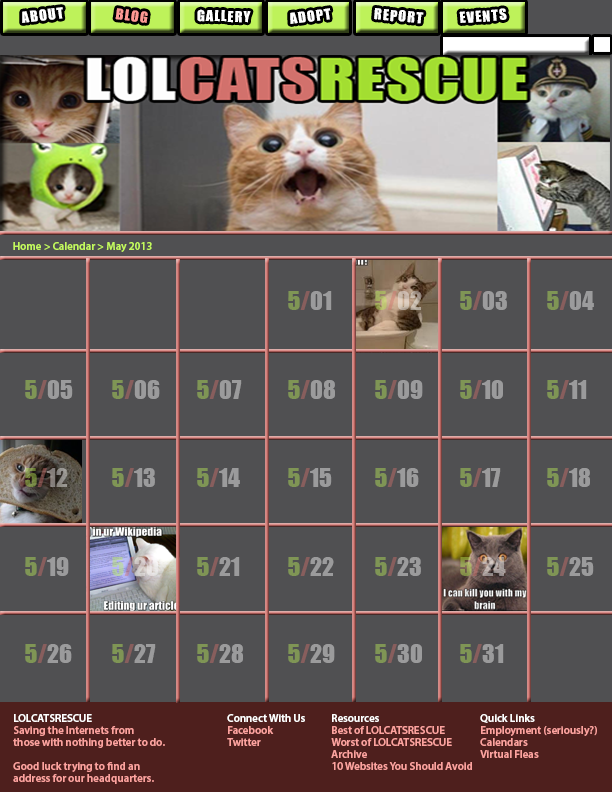
<style>
.page{position:relative;width:612px;height:792px;background:#505052}
.page>*{position:absolute;margin:0}
.t1{font:14px "Impact";letter-spacing:0.075em;color:#ffffff;scale:1.03 1}
.t2{font:14px "Impact";letter-spacing:0.075em;color:#fd9994;scale:1.03 1}
.t3{font:14px "Impact";letter-spacing:0.075em;color:#fdfdfd;scale:1.03 1}
.t4{font:11px "MyriadPro-Semibold";color:#c3f95d}
.t5{font:24px "Impact"}
.t6{font:11px/12px "MyriadPro-Semibold";color:#fda29e}
.t7{font:11px/12px "MyriadPro-Semibold";color:#ffffff}
</style>
<div class="page">
<p class="t1" style="left:22px;top:7px;width:41px;height:16px;rotate:-7deg">ABOUT</p>
<p class="t2" style="left:115px;top:8px;width:33px;height:15px;rotate:7deg">BLOG</p>
<p class="t1" style="left:197px;top:9px;width:54px;height:14px;rotate:2deg">GALLERY</p>
<p class="t1" style="left:290px;top:8px;width:41px;height:16px;rotate:-8deg">ADOPT</p>
<p class="t3" style="left:374px;top:8px;width:50px;height:16px;rotate:5deg">REPORT</p>
<p class="t1" style="left:459px;top:8px;width:48px;height:15px;rotate:-4deg">EVENTS</p>
<p class="t4" style="left:13px;top:242px;width:139px;height:10px">Home &gt; Calendar &gt; May 2013</p>
<p class="t5" style="left:288px;top:291px;width:44px;height:19px">5/01</p>
<p class="t5" style="left:375px;top:291px;width:47px;height:19px">5/02</p>
<p class="t5" style="left:460px;top:291px;width:47px;height:19px">5/03</p>
<p class="t5" style="left:547px;top:291px;width:47px;height:19px">5/04</p>
<p class="t5" style="left:25px;top:380px;width:48px;height:19px">5/05</p>
<p class="t5" style="left:112px;top:380px;width:48px;height:19px">5/06</p>
<p class="t5" style="left:197px;top:380px;width:45px;height:19px">5/07</p>
<p class="t5" style="left:288px;top:380px;width:47px;height:19px">5/08</p>
<p class="t5" style="left:375px;top:380px;width:48px;height:19px">5/09</p>
<p class="t5" style="left:460px;top:380px;width:43px;height:19px">5/10</p>
<p class="t5" style="left:547px;top:380px;width:40px;height:19px">5/11</p>
<p class="t5" style="left:25px;top:468px;width:43px;height:19px">5/12</p>
<p class="t5" style="left:112px;top:468px;width:43px;height:19px">5/13</p>
<p class="t5" style="left:197px;top:468px;width:43px;height:19px">5/14</p>
<p class="t5" style="left:288px;top:468px;width:44px;height:19px">5/15</p>
<p class="t5" style="left:375px;top:468px;width:44px;height:19px">5/16</p>
<p class="t5" style="left:460px;top:468px;width:41px;height:19px">5/17</p>
<p class="t5" style="left:547px;top:468px;width:43px;height:19px">5/18</p>
<p class="t5" style="left:25px;top:557px;width:44px;height:19px">5/19</p>
<p class="t5" style="left:112px;top:557px;width:46px;height:19px">5/20</p>
<p class="t5" style="left:197px;top:557px;width:43px;height:19px">5/21</p>
<p class="t5" style="left:288px;top:557px;width:46px;height:19px">5/22</p>
<p class="t5" style="left:375px;top:557px;width:46px;height:19px">5/23</p>
<p class="t5" style="left:460px;top:557px;width:46px;height:19px">5/24</p>
<p class="t5" style="left:547px;top:557px;width:47px;height:19px">5/25</p>
<p class="t5" style="left:25px;top:644px;width:47px;height:19px">5/26</p>
<p class="t5" style="left:112px;top:644px;width:44px;height:19px">5/27</p>
<p class="t5" style="left:197px;top:644px;width:46px;height:19px">5/28</p>
<p class="t5" style="left:288px;top:644px;width:47px;height:19px">5/29</p>
<p class="t5" style="left:375px;top:644px;width:47px;height:19px">5/30</p>
<p class="t5" style="left:460px;top:644px;width:44px;height:19px">5/31</p>
<p class="t6" style="left:13px;top:714px;width:152px;height:70px"><span class="t7">LOLCATSRESCUE<br></span>Saving the Internets from <br>those with nothing better to do.<br><br>Good luck trying to find an <br>address for our headquarters.</p>
<p class="t6" style="left:227px;top:714px;width:78px;height:32px"><span class="t7">Connect With Us<br></span>Facebook<br>Twitter</p>
<p class="t6" style="left:331px;top:714px;width:141px;height:56px"><span class="t7">Resources<br></span>Best of LOLCATSRESCUE<br>Worst of LOLCATSRESCUE<br>Archive<br>10 Websites You Should Avoid</p>
<p class="t6" style="left:480px;top:714px;width:117px;height:44px"><span class="t7">Quick Links<br></span>Employment (seriously?)<br>Calendars<br>Virtual Fleas</p>
</div>
